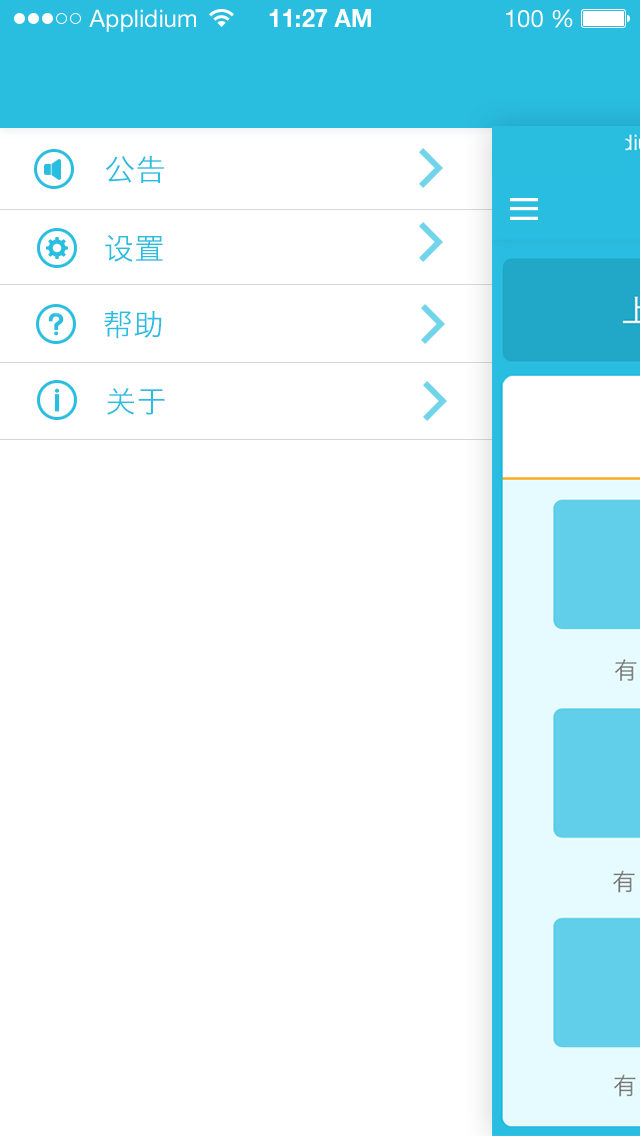
<style>
.page{position:relative;width:640px;height:1136px;background:#ffffff}
.page>*{position:absolute;margin:0}
.t1{font:30px "HiraginoSansGB-W3";letter-spacing:0.025em;color:#29bde0}
</style>
<div class="page">
<p class="t1" style="left:105px;top:156px;width:59px;height:27px">公告</p>
<p class="t1" style="left:105px;top:235px;width:58px;height:27px">设置</p>
<p class="t1" style="left:104px;top:311px;width:58px;height:28px">帮助</p>
<p class="t1" style="left:107px;top:388px;width:58px;height:27px">关于</p>
</div>
